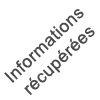
<style>
.page{position:relative;width:100px;height:100px;background:#ffffff}
.page>*{position:absolute;margin:0}
.t1{font:17.5px "ArialMT";letter-spacing:0.025em;color:#4c4c4c}
</style>
<div class="page">
<p class="t1" style="left:4px;top:9px;width:91px;height:86px;text-align:center;rotate:-44deg">Informations<br>récupérées</p>
</div>
